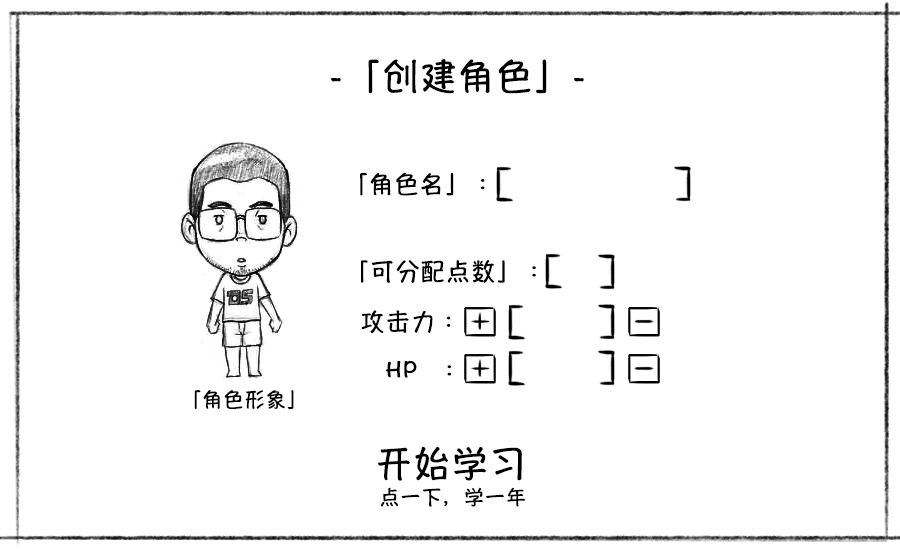
<style>
.page{position:relative;width:900px;height:560px;background:#ffffff}
.page>*{position:absolute;margin:0}
.t1{font:36px "HannotateSC-W7";letter-spacing:0.055em;color:#000000}
.t2{font:24px "HannotateSC-W7";letter-spacing:0.055em;color:#000000}
.t3{font:20px "HannotateSC-W7";letter-spacing:0.055em;color:#000000}
</style>
<div class="page">
<p class="t1" style="left:331px;top:59px;width:253px;height:35px">-「创建角色」-</p>
<p class="t2" style="left:360px;top:172px;width:125px;height:24px">「角色名」：</p>
<p class="t2" style="left:360px;top:260px;width:176px;height:23px">「可分配点数」：</p>
<p class="t2" style="left:361px;top:310px;width:90px;height:24px">攻击力：</p>
<p class="t2" style="left:386px;top:360px;width:65px;height:18px">HP  ：</p>
<p class="t3" style="left:194px;top:390px;width:100px;height:19px">「角色形象」</p>
<p class="t1" style="left:378px;top:446px;width:144px;height:35px">开始学习</p>
<p class="t3" style="left:381px;top:487px;width:145px;height:20px">点一下，学一年</p>
</div>
